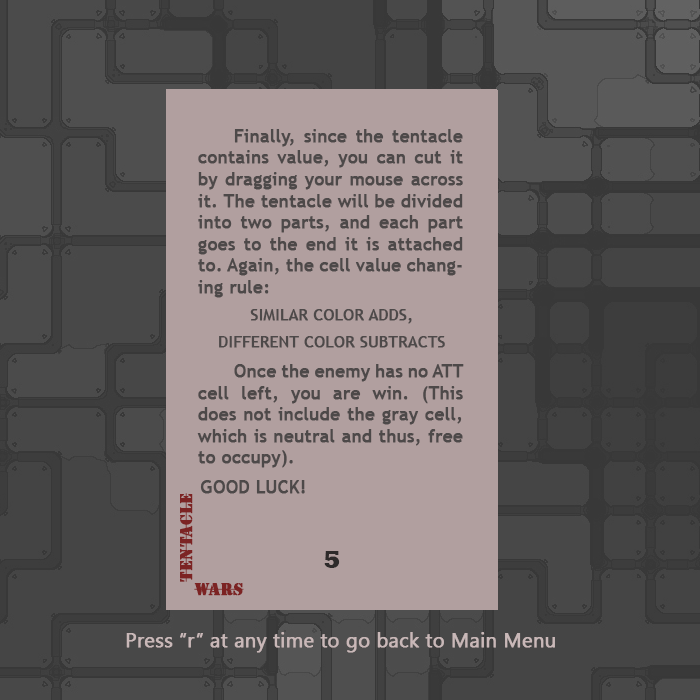
<style>
.page{position:relative;width:700px;height:700px;background:#b19f9f}
.page>*{position:absolute;margin:0}
.t1{font:18px "TrebuchetMS";color:#4d4949;font-weight:bold}
.t2{font:35px "TrajanPro-Regular";color:#4d4949;font-weight:bold;font-style:italic}
.t3{font:16px "TrebuchetMS";color:#4d4949;font-weight:bold}
.t4{font:16px "StencilStd";color:#7c2323;font-weight:bold}
.t5{font:25px "Rockwell-ExtraBold";color:#2e2b2b}
.t6{font:20px "SegoeUISymbol";color:#c9b8b8;font-weight:bold}
</style>
<div class="page">
<p class="t1" style="left:197px;top:129px;width:267px;height:365px;text-align:justify"><span class="t2"> </span>Finally, since the tentacle contains value, you can cut it by dragging your mouse across it. The tentacle will be divided into two parts, and each part goes to the end it is attached to. Again, the cell value changing rule:<br><span class="t3">SIMILAR COLOR ADDS,<br>DIFFERENT COLOR SUBTRACTS<br> </span>Once the enemy has no ATT cell left, you are win. (This does not include the gray cell, which is neutral and thus, free to occupy).<br>GOOD LUCK!</p>
<p class="t4" style="left:180px;top:493px;width:13px;height:89px;rotate:-90deg">Tentacle</p>
<p class="t5" style="left:324px;top:551px;width:16px;height:17px">5</p>
<p class="t4" style="left:194px;top:583px;width:50px;height:13px">WARS</p>
<p class="t6" style="left:126px;top:632px;width:429px;height:21px">Press “r” at any time to go back to Main Menu</p>
</div>
